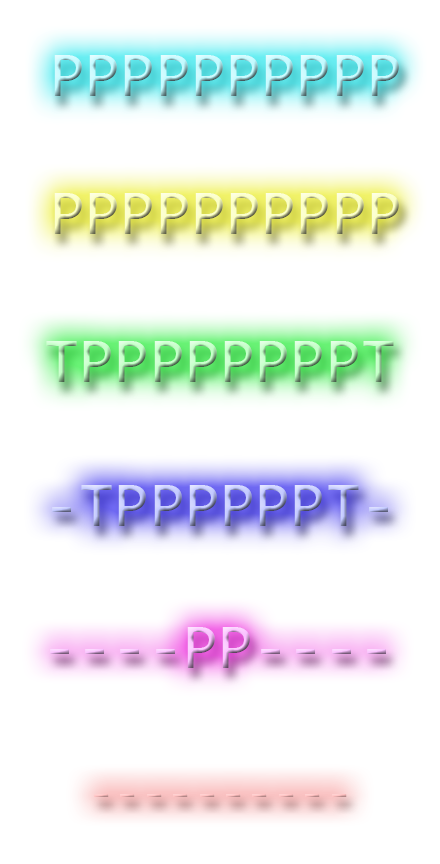
<style>
.page{position:relative;width:440px;height:864px;background:#ffffff}
.page>*{position:absolute;margin:0}
.t1{font:64px "Consolas"}
</style>
<div class="page">
<p class="t1" style="left:54px;top:55px;width:345px;height:41px">PPPPPPPPPP</p>
<p class="t1" style="left:54px;top:193px;width:345px;height:41px">PPPPPPPPPP</p>
<p class="t1" style="left:46px;top:341px;width:348px;height:41px">TPPPPPPPPT</p>
<p class="t1" style="left:52px;top:485px;width:336px;height:41px">-TPPPPPPT-</p>
</div>
